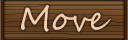
<style>
.page{position:relative;width:128px;height:40px}
.page>*{position:absolute;margin:0}
.t1{font:32px "SegoeScript";color:#f0d0b0}
</style>
<div class="page">
<p class="t1" style="left:21px;top:5px;width:90px;height:27px">Move</p>
</div>
